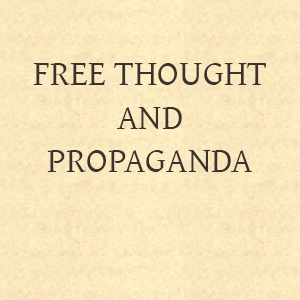
<style>
.page{position:relative;width:300px;height:300px}
.page>*{position:absolute;margin:0}
.t1{font:36px "GentiumPlus";color:#3b312d}
</style>
<div class="page">
<p class="t1" style="left:33px;top:63px;width:233px;height:109px;text-align:center">FREE THOUGHT AND <br>PROPAGANDA</p>
</div>
